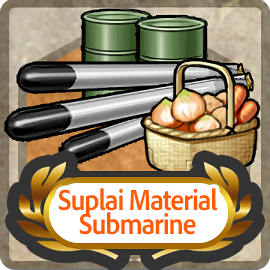
<style>
.page{position:relative;width:270px;height:270px}
.page>*{position:absolute;margin:0}
.t1{font:30px/24px "AdobeClean-Bold";letter-spacing:-0.04em;color:#ff5d00;scale:0.9 1}
</style>
<div class="page">
<p class="t1" style="left:58px;top:188px;width:159px;height:47px;text-align:center">Suplai Material<br>Submarine</p>
</div>
